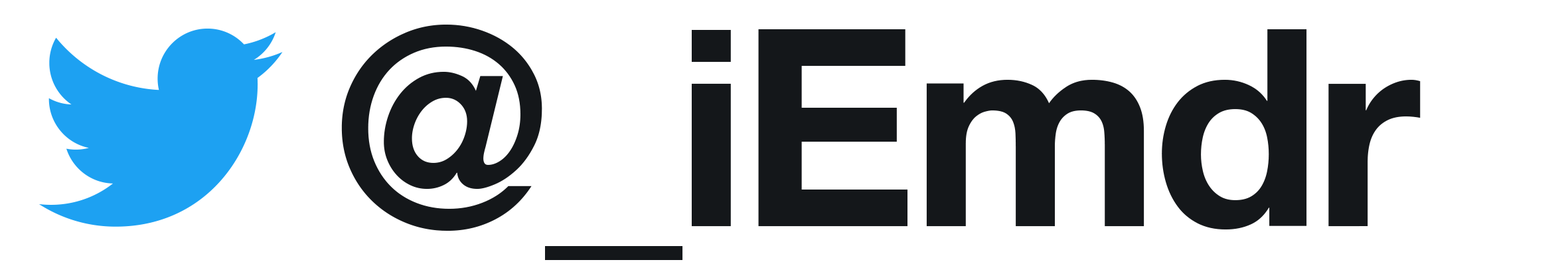
<style>
.page{position:relative;width:1568px;height:274px;background:#ffffff}
.page>*{position:absolute;margin:0}
.t1{font:274.8px "HelveticaNeue-Bold";letter-spacing:-0.025em;color:#14171a}
</style>
<div class="page">
<p class="t1" style="left:341px;top:25px;width:1080px;height:235px">@_iEmdr</p>
</div>
